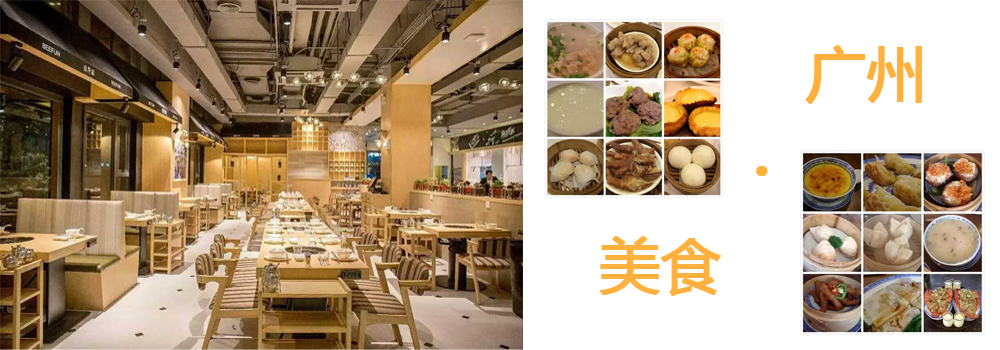
<style>
.page{position:relative;width:1000px;height:350px;background:#ffffff}
.page>*{position:absolute;margin:0}
.t1{font:60px "MicrosoftYaHei";color:#ffb03d;font-weight:bold}
.t2{font:72px "MicrosoftYaHei";color:#ffb03d;font-weight:bold}
</style>
<div class="page">
<p class="t1" style="left:805px;top:45px;width:117px;height:59px">广州</p>
<p class="t2" style="left:756px;top:166px;width:12px;height:10px">·</p>
<p class="t1" style="left:599px;top:236px;width:122px;height:60px">美食</p>
</div>
